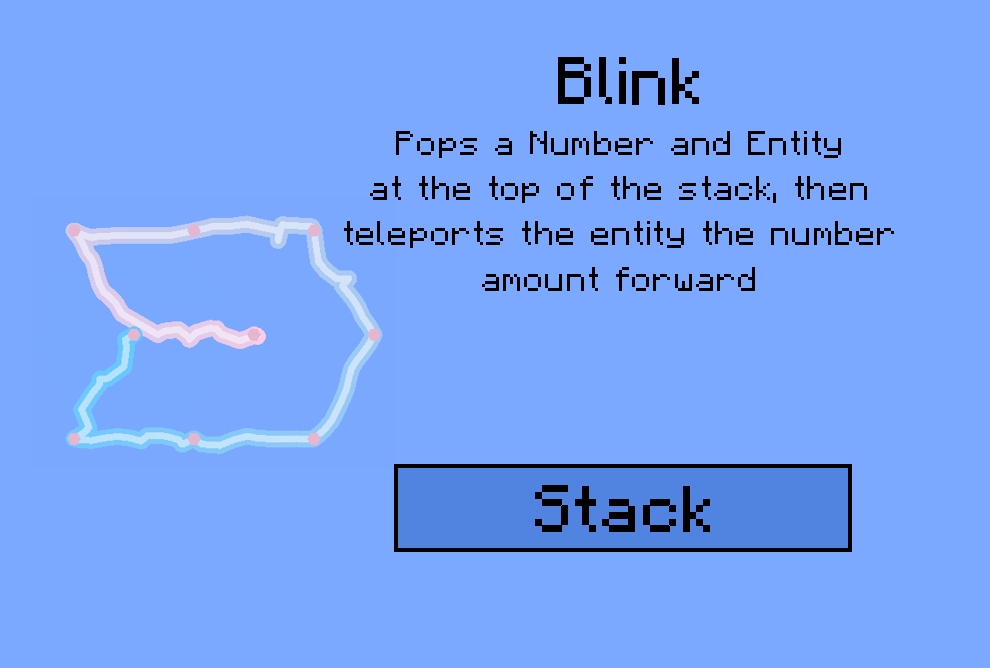
<style>
.page{position:relative;width:990px;height:668px;background:#7ba9ff}
.page>*{position:absolute;margin:0}
.t1{font:66.7px "Minecraft-Regular";color:#000000}
.t2{font:34.7px/45.3px "Minecraft-Regular";color:#000000}
</style>
<div class="page">
<p class="t1" style="left:558px;top:57px;width:141px;height:48px">Blink</p>
<p class="t2" style="left:344px;top:131px;width:550px;height:160px;text-align:center">Pops a Number and Entity<br>at the top of the stack, then<br>teleports the entity the number<br>amount forward</p>
<p class="t1" style="left:535px;top:485px;width:175px;height:47px">Stack</p>
</div>
